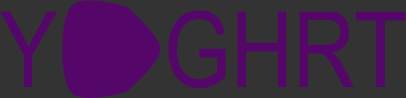
<style>
.page{position:relative;width:406px;height:98px;background:#333333}
.page>*{position:absolute;margin:0}
.t1{font:105px "ArialNarrow";color:#540669}
</style>
<div class="page">
<p class="t1" style="left:0px;top:11px;width:57px;height:76px">Y</p>
<p class="t1" style="left:168px;top:10px;width:238px;height:79px">GHRT</p>
</div>
